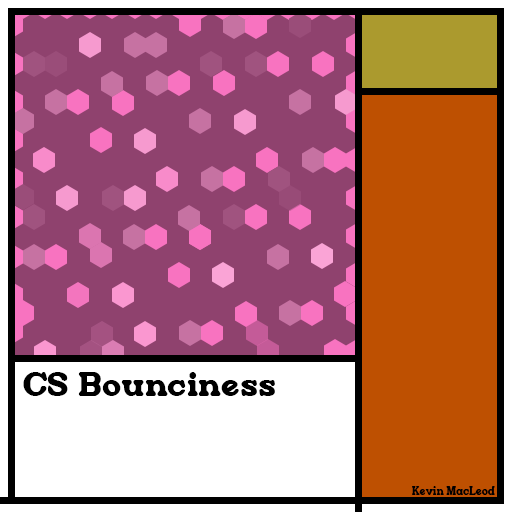
<style>
.page{position:relative;width:512px;height:512px;background:#8f426e}
.page>*{position:absolute;margin:0}
.t1{font:34.1px "Restrick";color:#000000}
.t2{font:10.7px "Restrick";color:#000000}
</style>
<div class="page">
<p class="t1" style="left:23px;top:372px;width:252px;height:24px">CS Bounciness</p>
<p class="t2" style="left:412px;top:486px;width:83px;height:9px">Kevin MacLeod</p>
</div>
